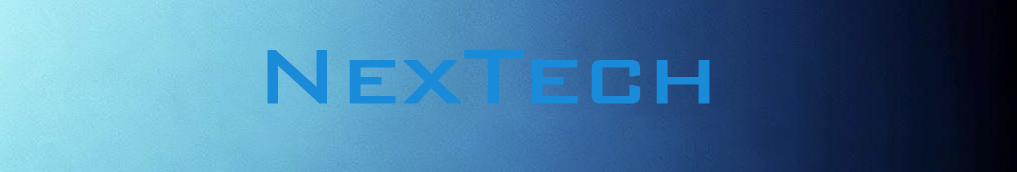
<style>
.page{position:relative;width:1017px;height:172px}
.page>*{position:absolute;margin:0}
.t1{font:100px "BankGothicBT-Light";color:#1a8cd9;font-weight:bold}
</style>
<div class="page">
<p class="t1" style="left:267px;top:50px;width:443px;height:54px">NexTech</p>
</div>
